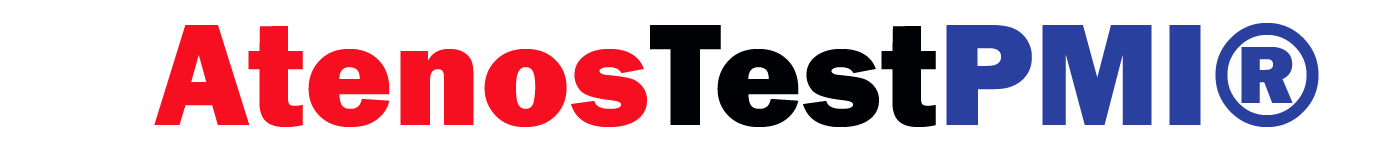
<style>
.page{position:relative;width:1392px;height:158px;background:#ffffff}
.page>*{position:absolute;margin:0}
.t1{font:150px "FranklinGothic-Heavy";color:#f50f20}
.t2{font:150px "FranklinGothic-Heavy";color:#000104}
.t3{font:150px "FranklinGothic-Heavy";color:#2a409f}
</style>
<div class="page">
<p class="t1" style="left:154px;top:23px;width:1165px;height:104px">Atenos<span class="t2">Test</span><span class="t3">PMI®</span></p>
</div>
